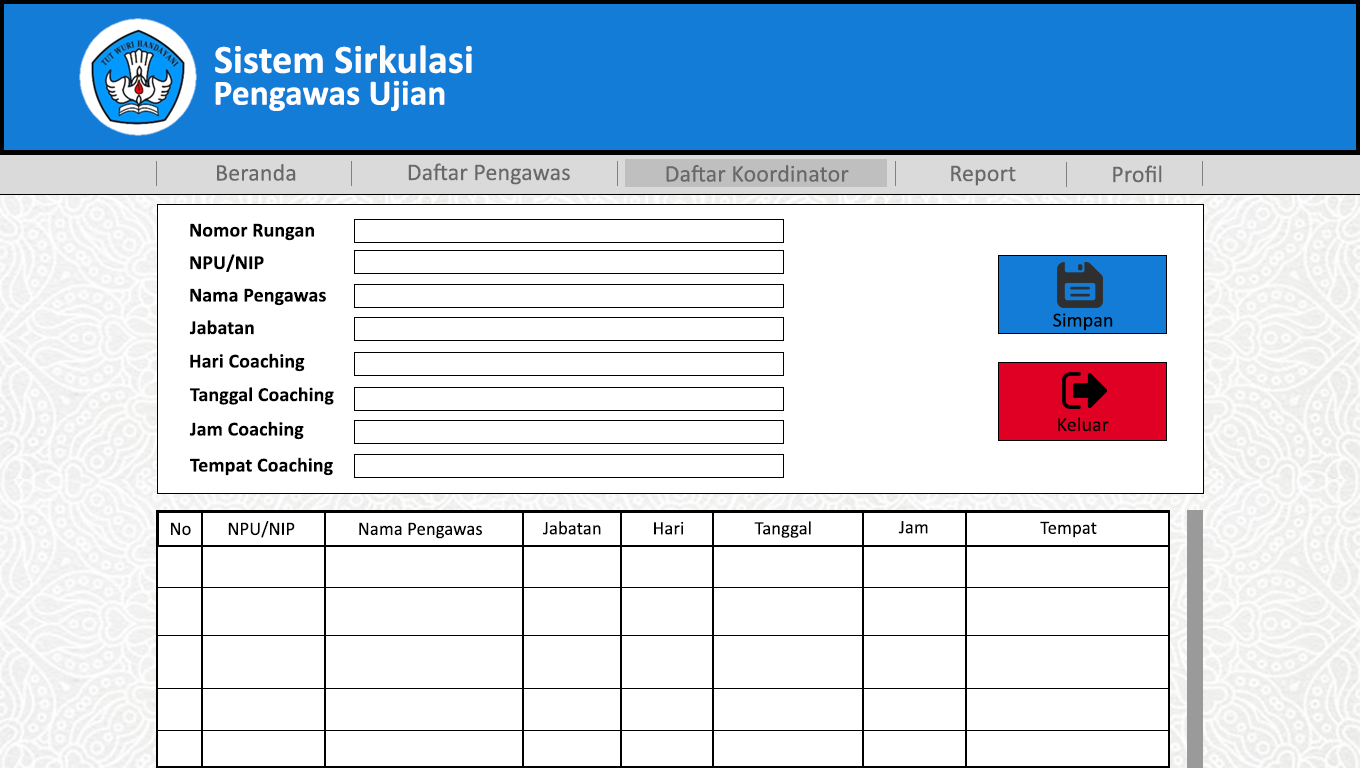
<style>
.page{position:relative;width:1360px;height:768px;background:#ffffff}
.page>*{position:absolute;margin:0}
.t1{font:40.1px "Calibri-Bold";letter-spacing:0.005em;color:#fdfdfd}
.t2{font:35.6px "Calibri-Bold";letter-spacing:0.005em;color:#fffefe}
.t3{font:24px "Calibri";letter-spacing:0.005em;color:#6a6969}
.t4{font:20px "Calibri-Bold";letter-spacing:0.005em;color:#000000}
.t5{font:20px "Calibri";letter-spacing:0.005em;color:#000000}
.t6{font:19px "Calibri";letter-spacing:0.005em;color:#000000}
</style>
<div class="page">
<p class="t1" style="left:215px;top:45px;width:257px;height:29px">Sistem Sirkulasi</p>
<p class="t2" style="left:215px;top:80px;width:230px;height:31px">Pengawas Ujian</p>
<p class="t3" style="left:217px;top:164px;width:79px;height:17px">Beranda</p>
<p class="t3" style="left:408px;top:163px;width:162px;height:22px">Daftar Pengawas</p>
<p class="t3" style="left:666px;top:165px;width:183px;height:17px">Daftar Koordinator</p>
<p class="t3" style="left:951px;top:165px;width:65px;height:21px">Report</p>
<p class="t3" style="left:1113px;top:165px;width:49px;height:18px">Profil</p>
<p class="t4" style="left:190px;top:223px;width:124px;height:18px">Nomor Rungan</p>
<p class="t4" style="left:190px;top:254px;width:74px;height:18px">NPU/NIP</p>
<p class="t4" style="left:190px;top:288px;width:136px;height:18px">Nama Pengawas</p>
<p class="t5" style="left:1053px;top:313px;width:60px;height:18px">Simpan</p>
<p class="t4" style="left:189px;top:320px;width:65px;height:15px">Jabatan</p>
<p class="t4" style="left:190px;top:353px;width:115px;height:19px">Hari Coaching</p>
<p class="t4" style="left:190px;top:387px;width:144px;height:18px">Tanggal Coaching</p>
<p class="t4" style="left:189px;top:421px;width:115px;height:19px">Jam Coaching</p>
<p class="t5" style="left:1058px;top:417px;width:51px;height:15px">Keluar</p>
<p class="t4" style="left:190px;top:457px;width:143px;height:19px">Tempat Coaching</p>
<p class="t6" style="left:228px;top:521px;width:67px;height:17px">NPU/NIP</p>
<p class="t6" style="left:543px;top:521px;width:58px;height:14px">Jabatan</p>
<p class="t6" style="left:654px;top:521px;width:30px;height:14px">Hari</p>
<p class="t6" style="left:754px;top:521px;width:57px;height:17px">Tanggal</p>
<p class="t6" style="left:898px;top:521px;width:30px;height:13px">Jam</p>
<p class="t6" style="left:1040px;top:521px;width:57px;height:17px">Tempat</p>
<p class="t6" style="left:171px;top:522px;width:20px;height:14px">No</p>
<p class="t6" style="left:359px;top:522px;width:123px;height:17px">Nama Pengawas</p>
</div>
